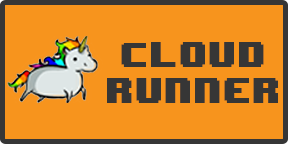
<style>
.page{position:relative;width:288px;height:144px;background:#f7941d}
.page>*{position:absolute;margin:0}
.t1{font:29.8px "8BITWONDERNominal";color:#363636}
</style>
<div class="page">
<p class="t1" style="left:107px;top:42px;width:171px;height:61px;text-align:center">Cloud<br>runner</p>
</div>
